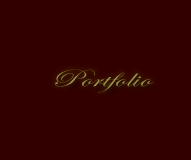
<style>
.page{position:relative;width:191px;height:160px;background:#330000}
.page>*{position:absolute;margin:0}
.t1{font:25.2px "EdwardianScriptITC";letter-spacing:0.025em;color:#93934a;scale:1.43 1}
</style>
<div class="page">
<p class="t1" style="left:55px;top:69px;width:98px;height:24px">Portfolio</p>
</div>
